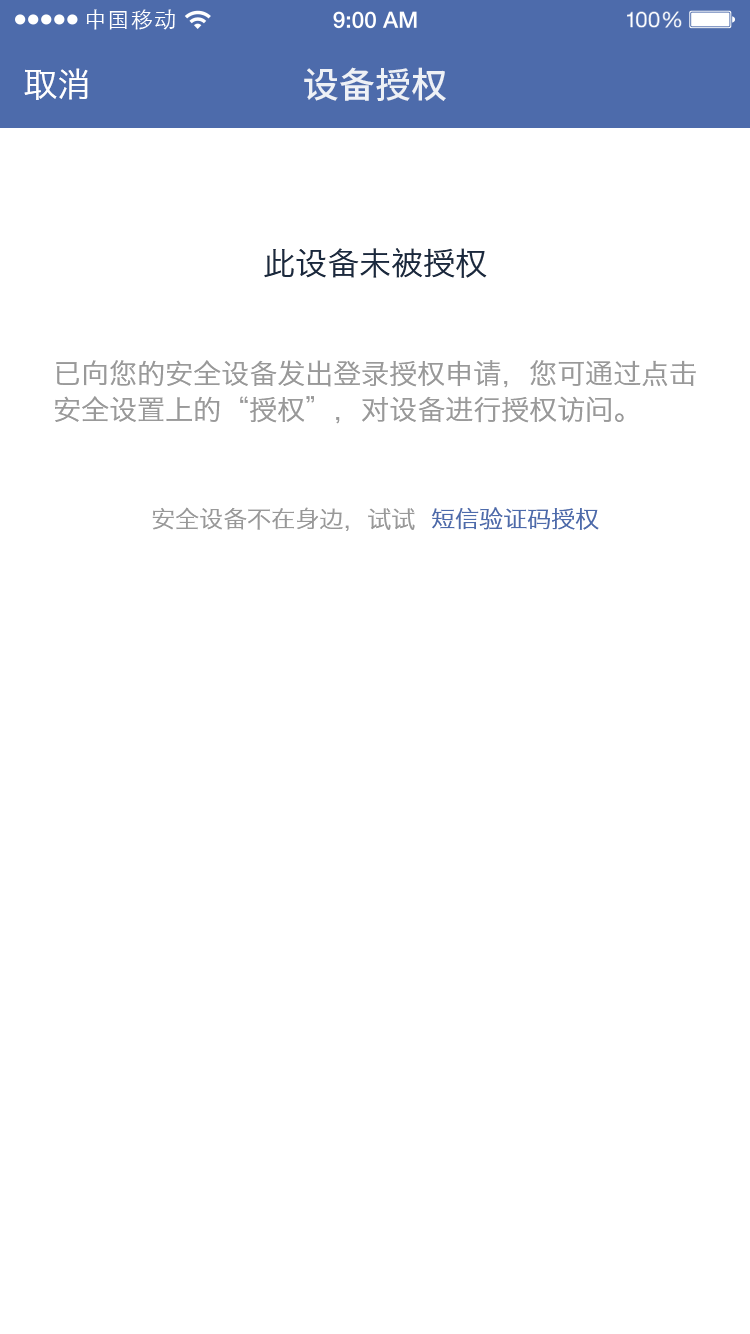
<style>
.page{position:relative;width:750px;height:1334px;background:#ffffff}
.page>*{position:absolute;margin:0}
.t1{font:21.9px "STXihei";letter-spacing:0.04em;color:#ffffff}
.t2{font:34px "HiraginoSansGB-W3";color:#ffffff}
.t3{font:36px "NotoSansHans-Medium";color:#eef1f6}
.t4{font:32px "HiraginoSansGB-W3";color:#1a293e}
.t5{font:28px/36px "HiraginoSansGB-W3";color:#999999}
.t6{font:24px "HiraginoSansGB-W3";color:#999999}
.t7{font:24px "HiraginoSansGB-W3";color:#4d6bab}
</style>
<div class="page">
<p class="t1" style="left:86px;top:9px;width:89px;height:21px">中国移动</p>
<p class="t2" style="left:24px;top:68px;width:64px;height:32px">取消</p>
<p class="t3" style="left:304px;top:67px;width:142px;height:34px">设备授权</p>
<p class="t4" style="left:264px;top:248px;width:223px;height:30px">此设备未被授权</p>
<p class="t5" style="left:55px;top:360px;width:641px;height:64px">已向您的安全设备发出登录授权申请，您可通过点击<br>安全设置上的“授权”，对设备进行授权访问。</p>
<p class="t6" style="left:152px;top:507px;width:447px;height:24px">安全设备不在身边，试试  <span class="t7">短信验证码授权</span></p>
</div>
